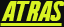
<style>
.page{position:relative;width:64px;height:27px;background:#d8f322}
.page>*{position:absolute;margin:0}
.t1{font:28.3px "RadiumCorp";color:#d8f322;scale:1.17 1}
</style>
<div class="page">
<p class="t1" style="left:0px;top:1px;width:65px;height:25px">atras</p>
</div>
